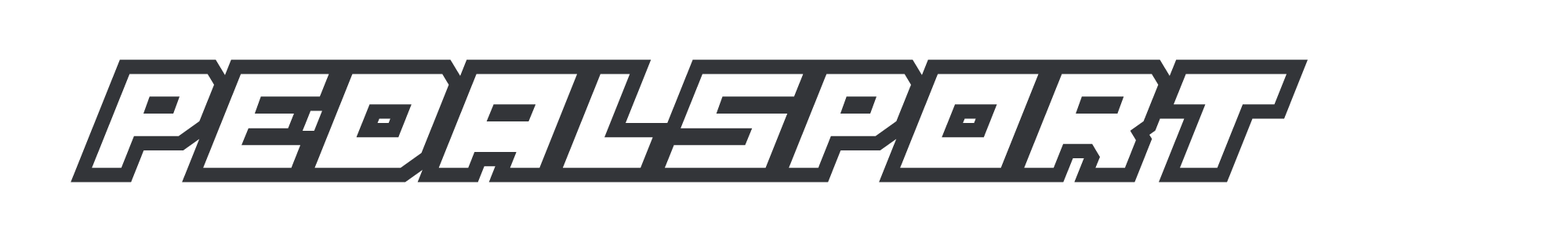
<style>
.page{position:relative;width:1568px;height:235px;background:#ffffff}
.page>*{position:absolute;margin:0}
.t1{font:126.8px "FullPack2025";color:#333539}
</style>
<div class="page">
<p class="t1" style="left:71px;top:60px;width:1237px;height:123px">Pedalsport</p>
</div>
